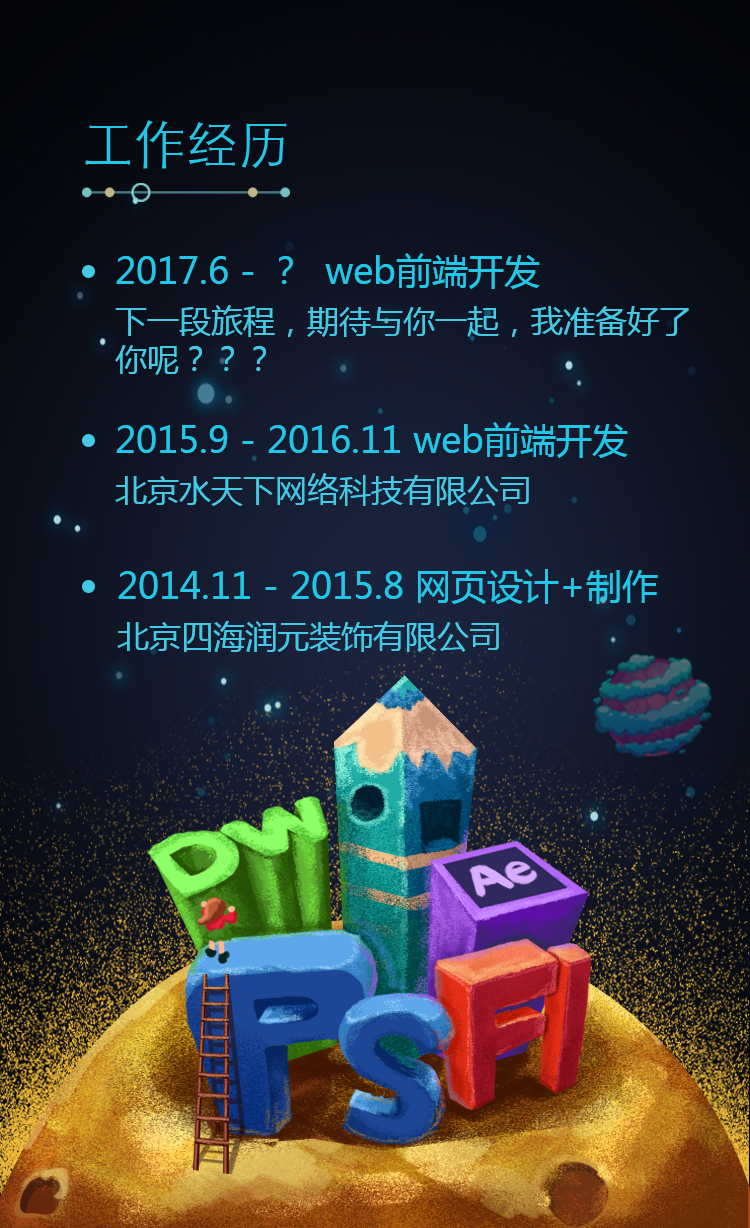
<style>
.page{position:relative;width:750px;height:1228px}
.page>*{position:absolute;margin:0}
.t1{font:51.9px "STXihei";color:#22c7e8}
.t2{font:36px "MicrosoftYaHei";color:#22c7e8}
.t3{font:32px "MicrosoftYaHei";color:#43c9e4}
</style>
<div class="page">
<p class="t1" style="left:85px;top:120px;width:202px;height:49px">工作经历</p>
<p class="t2" style="left:116px;top:253px;width:424px;height:36px">2017.6 - ？  web前端开发</p>
<p class="t3" style="left:115px;top:305px;width:574px;height:70px">下一段旅程，期待与你一起，我准备好了<br>你呢？？？</p>
<p class="t2" style="left:116px;top:422px;width:512px;height:36px">2015.9 - 2016.11 web前端开发</p>
<p class="t3" style="left:115px;top:473px;width:414px;height:33px">北京水天下网络科技有限公司</p>
<p class="t2" style="left:118px;top:569px;width:540px;height:35px">2014.11 - 2015.8 网页设计+制作</p>
<p class="t3" style="left:117px;top:621px;width:382px;height:31px">北京四海润元装饰有限公司</p>
</div>
